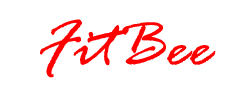
<style>
.page{position:relative;width:250px;height:100px;background:#ffffff}
.page>*{position:absolute;margin:0}
.t1{font:72px "RageItalic";color:#ff0000}
</style>
<div class="page">
<p class="t1" style="left:40px;top:19px;width:176px;height:59px">FitBee</p>
</div>
